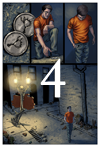
<style>
.page{position:relative;width:100px;height:147px}
.page>*{position:absolute;margin:0}
.t1{font:58.3px "PlantagenetCherokee";color:#ffffff}
</style>
<div class="page">
<p class="t1" style="left:40px;top:58px;width:26px;height:40px">4</p>
</div>
